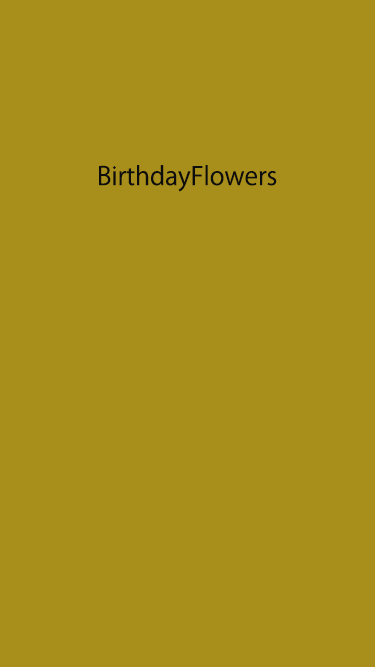
<style>
.page{position:relative;width:375px;height:667px;background:#a88e1a}
.page>*{position:absolute;margin:0}
.t1{font:25px "KozGoPr6N-Regular";color:#0e0d0d}
</style>
<div class="page">
<p class="t1" style="left:99px;top:165px;width:178px;height:27px">BirthdayFlowers</p>
</div>
